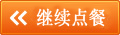
<style>
.page{position:relative;width:120px;height:35px}
.page>*{position:absolute;margin:0}
.t1{font:18.9px "SimSun";color:#ffffff;font-weight:bold;scale:0.9 1}
</style>
<div class="page">
<p class="t1" style="left:36px;top:8px;width:70px;height:19px">继续点餐</p>
</div>
